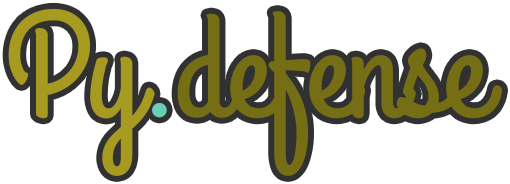
<style>
.page{position:relative;width:510px;height:184px;background:#ffffff}
.page>*{position:absolute;margin:0}
.t1{font:150px "GrandHotel-Regular";letter-spacing:-0.02em;color:#756e15}
.t2{font:150px "GrandHotel-Regular";letter-spacing:-0.02em;color:#a69a20}
.t3{font:150px "GrandHotel-Regular";letter-spacing:-0.02em;color:#6aceb6}
</style>
<div class="page">
<p class="t1" style="left:8px;top:8px;width:494px;height:168px"><span class="t2">Py</span><span class="t3">.</span>defense</p>
</div>
